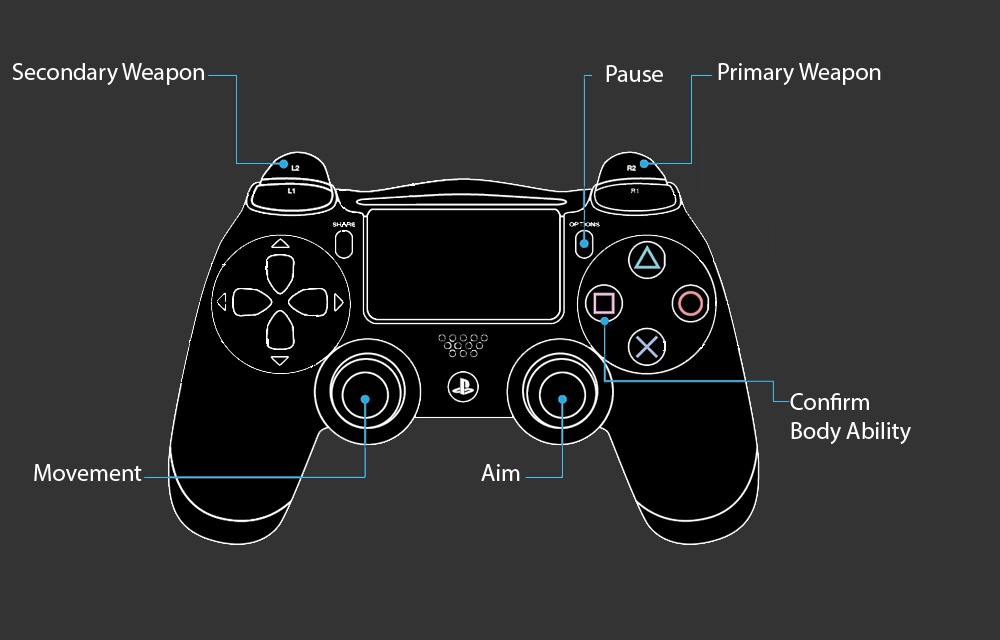
<style>
.page{position:relative;width:1000px;height:640px;background:#333333}
.page>*{position:absolute;margin:0}
.t1{font:24px "MyriadPro-Regular";color:#ffffff}
</style>
<div class="page">
<p class="t1" style="left:12px;top:63px;width:192px;height:22px">Secondary Weapon</p>
<p class="t1" style="left:606px;top:65px;width:57px;height:17px">Pause</p>
<p class="t1" style="left:718px;top:63px;width:163px;height:22px">Primary Weapon</p>
<p class="t1" style="left:790px;top:393px;width:121px;height:51px">Confirm<br>Body Ability</p>
<p class="t1" style="left:34px;top:464px;width:108px;height:17px">Movement</p>
<p class="t1" style="left:481px;top:464px;width:39px;height:17px">Aim</p>
</div>
